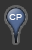
<style>
.page{position:relative;width:32px;height:50px;background:#333333}
.page>*{position:absolute;margin:0}
.t1{font:8px "MicrosoftSansSerif";color:#ffffff;scale:1.16 1}
</style>
<div class="page">
<p class="t1" style="left:9px;top:14px;width:13px;height:6px">CP</p>
</div>
